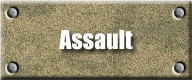
<style>
.page{position:relative;width:192px;height:80px}
.page>*{position:absolute;margin:0}
.t1{font:24px "Impact";color:#ffffff}
</style>
<div class="page">
<p class="t1" style="left:59px;top:30px;width:74px;height:20px">Assault</p>
</div>
